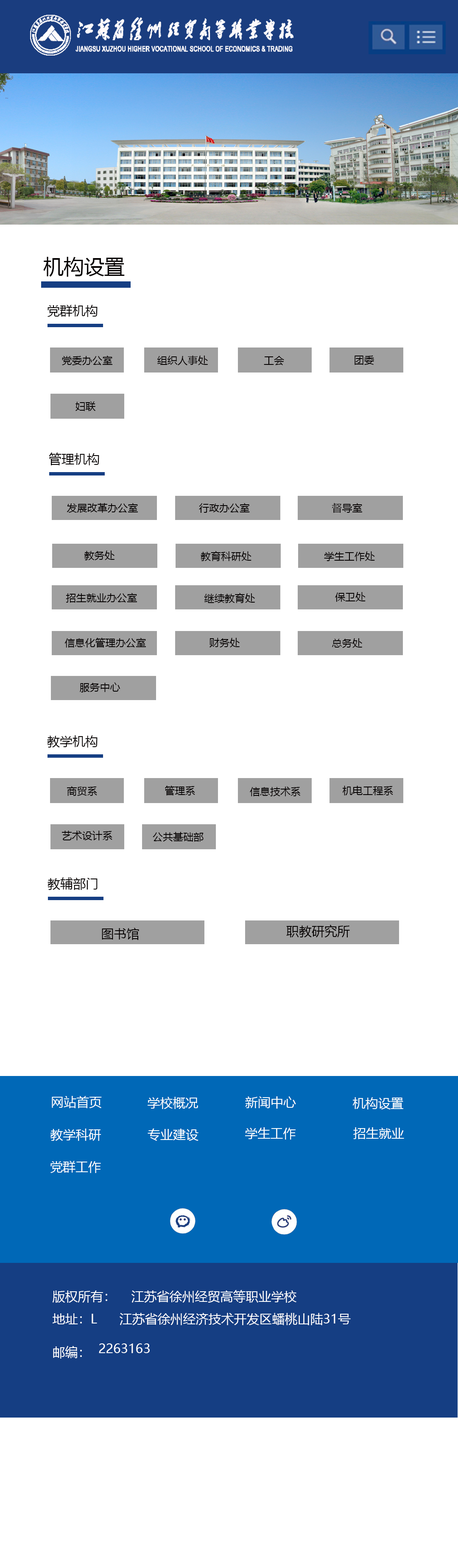
<style>
.page{position:relative;width:458px;height:1568px;background:#ffffff}
.page>*{position:absolute;margin:0}
.t1{font:20.3px "MicrosoftYaHei";color:#040000}
.t2{font:12.7px "MicrosoftYaHei";color:#040000}
.t3{font:10.2px "MicrosoftYaHei";color:#040000}
.t4{font:12.7px "MicrosoftYaHei";color:#ffffff}
</style>
<div class="page">
<p class="t1" style="left:43px;top:257px;width:82px;height:20px">机构设置</p>
<p class="t2" style="left:47px;top:305px;width:50px;height:12px">党群机构</p>
<p class="t3" style="left:62px;top:356px;width:50px;height:9px">党委办公室</p>
<p class="t3" style="left:157px;top:356px;width:51px;height:9px">组织人事处</p>
<p class="t3" style="left:264px;top:356px;width:20px;height:9px">工会</p>
<p class="t3" style="left:354px;top:356px;width:20px;height:9px">团委</p>
<p class="t3" style="left:75px;top:401px;width:21px;height:10px">妇联</p>
<p class="t2" style="left:49px;top:453px;width:50px;height:12px">管理机构</p>
<p class="t3" style="left:67px;top:503px;width:71px;height:10px">发展改革办公室</p>
<p class="t3" style="left:199px;top:503px;width:51px;height:10px">行政办公室</p>
<p class="t3" style="left:331px;top:503px;width:31px;height:10px">督导室</p>
<p class="t3" style="left:84px;top:550px;width:31px;height:10px">教务处</p>
<p class="t3" style="left:200px;top:551px;width:51px;height:10px">教育科研处</p>
<p class="t3" style="left:324px;top:551px;width:51px;height:10px">学生工作处</p>
<p class="t3" style="left:66px;top:593px;width:71px;height:10px">招生就业办公室</p>
<p class="t3" style="left:204px;top:593px;width:51px;height:10px">继续教育处</p>
<p class="t3" style="left:335px;top:592px;width:30px;height:10px">保卫处</p>
<p class="t3" style="left:64px;top:638px;width:82px;height:10px">信息化管理办公室</p>
<p class="t3" style="left:209px;top:638px;width:31px;height:10px">财务处</p>
<p class="t3" style="left:331px;top:638px;width:31px;height:10px">总务处</p>
<p class="t3" style="left:79px;top:682px;width:41px;height:10px">服务中心</p>
<p class="t2" style="left:47px;top:735px;width:50px;height:13px">教学机构</p>
<p class="t3" style="left:164px;top:786px;width:31px;height:9px">管理系</p>
<p class="t3" style="left:342px;top:786px;width:51px;height:9px">机电工程系</p>
<p class="t3" style="left:67px;top:786px;width:30px;height:10px">商贸系</p>
<p class="t3" style="left:250px;top:787px;width:50px;height:9px">信息技术系</p>
<p class="t3" style="left:62px;top:831px;width:50px;height:9px">艺术设计系</p>
<p class="t3" style="left:153px;top:832px;width:50px;height:10px">公共基础部</p>
<p class="t2" style="left:47px;top:877px;width:50px;height:13px">教辅部门</p>
<p class="t2" style="left:102px;top:928px;width:37px;height:12px">图书馆</p>
<p class="t2" style="left:286px;top:925px;width:64px;height:12px">职教研究所</p>
<p class="t4" style="left:52px;top:1096px;width:50px;height:12px">网站首页</p>
<p class="t4" style="left:147px;top:1097px;width:51px;height:12px">学校概况</p>
<p class="t4" style="left:245px;top:1096px;width:51px;height:13px">新闻中心</p>
<p class="t4" style="left:353px;top:1097px;width:50px;height:12px">机构设置</p>
<p class="t4" style="left:50px;top:1129px;width:51px;height:12px">教学科研</p>
<p class="t4" style="left:147px;top:1129px;width:51px;height:12px">专业建设</p>
<p class="t4" style="left:245px;top:1127px;width:50px;height:13px">学生工作</p>
<p class="t4" style="left:353px;top:1127px;width:51px;height:12px">招生就业</p>
<p class="t4" style="left:50px;top:1161px;width:51px;height:12px">党群工作</p>
<p class="t4" style="left:131px;top:1290px;width:165px;height:13px">江苏省徐州经贸高等职业学校</p>
<p class="t4" style="left:52px;top:1290px;width:55px;height:13px">版权所有：</p>
<p class="t4" style="left:52px;top:1313px;width:45px;height:11px">地址：L<br>：</p>
<p class="t4" style="left:120px;top:1313px;width:230px;height:12px">江苏省徐州经济技术开发区蟠桃山陆31号</p>
<p class="t4" style="left:53px;top:1346px;width:29px;height:13px">邮编：</p>
<p class="t4" style="left:99px;top:1343px;width:51px;height:10px">2263163</p>
</div>
